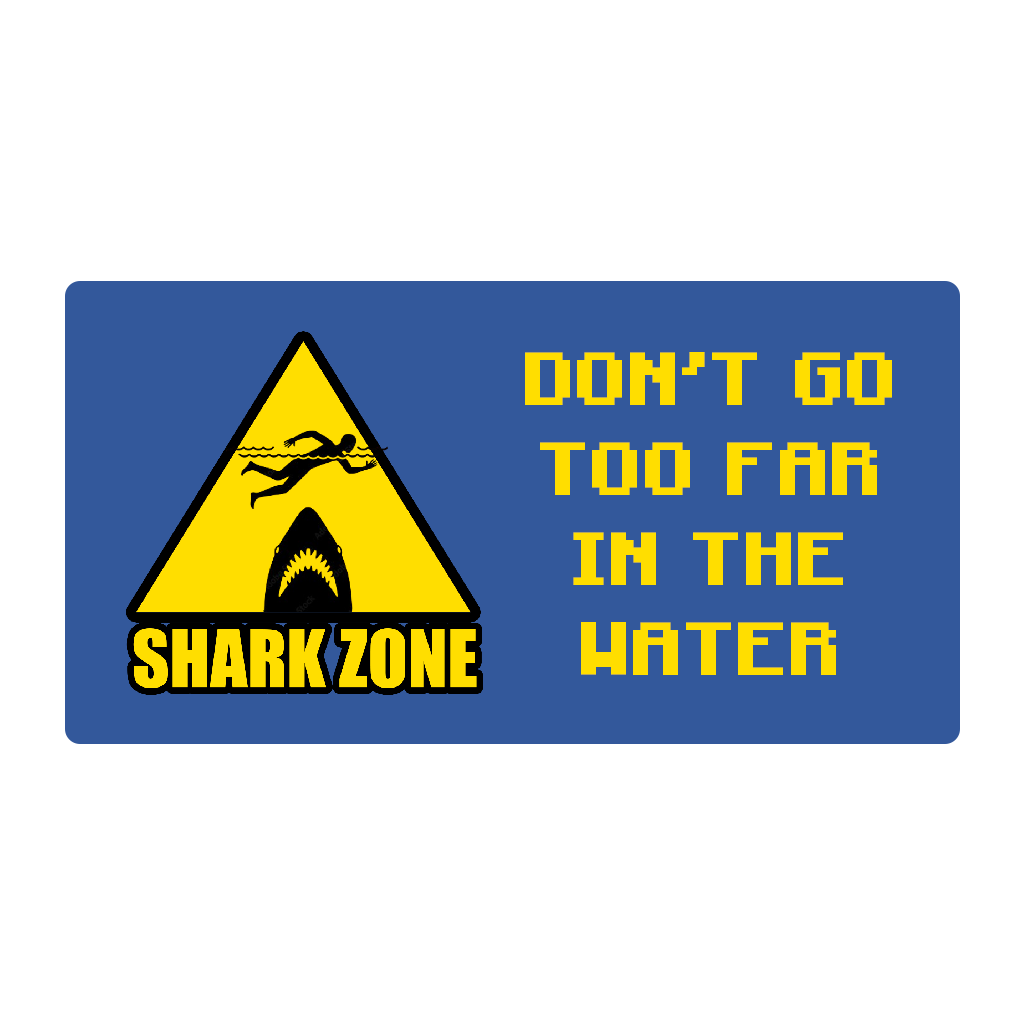
<style>
.page{position:relative;width:1024px;height:1024px;background:#ffffff}
.page>*{position:absolute;margin:0}
.t1{font:75px "Minecraft-Bold";color:#ffde00}
</style>
<div class="page">
<p class="t1" style="left:525px;top:352px;width:367px;height:323px;text-align:center">DON'T GO<br>TOO FAR<br>IN THE WATER</p>
</div>
